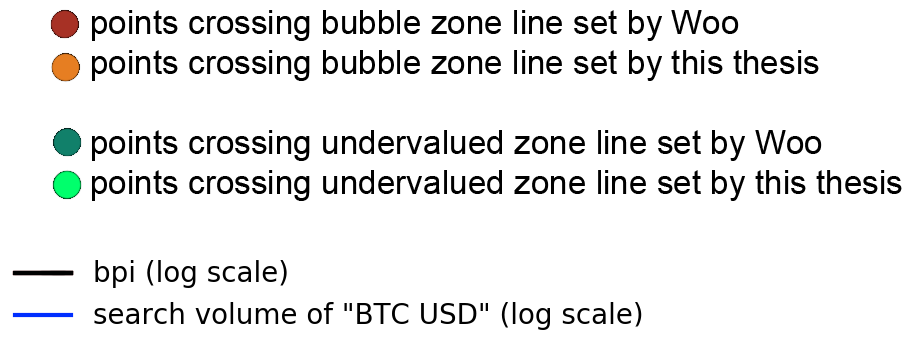
<style>
.page{position:relative;width:914px;height:339px;background:#ffffff}
.page>*{position:absolute;margin:0}
.t1{font:33.3px "ArialMT";color:#000000}
</style>
<div class="page">
<p class="t1" style="left:92px;top:10px;width:810px;height:191px">points crossing bubble zone line set by Woo<br>points crossing bubble zone line set by this thesis<br><br>points crossing undervalued zone line set by Woo<br>points crossing undervalued zone line set by this thesis</p>
</div>
